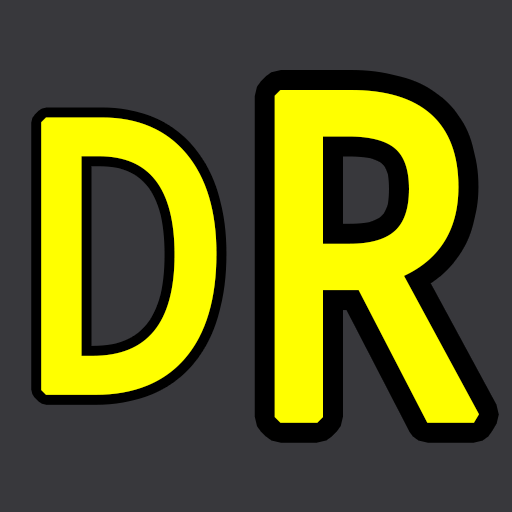
<style>
.page{position:relative;width:512px;height:512px;background:#38383c}
.page>*{position:absolute;margin:0}
.t1{font:450px "NotoMono";color:#ffff00;font-weight:bold;scale:0.89 1}
.t2{font:375px "NotoMono";color:#ffff00;font-weight:bold;scale:0.89 1}
</style>
<div class="page">
<p class="t1" style="left:274px;top:90px;width:205px;height:333px">R</p>
<p class="t2" style="left:41px;top:117px;width:176px;height:278px">D</p>
</div>
